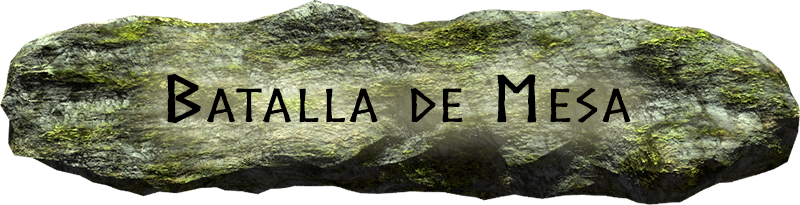
<style>
.page{position:relative;width:800px;height:205px}
.page>*{position:absolute;margin:0}
.t1{font:61.2px "Norse";color:#000000;font-variant:small-caps;font-weight:bold;scale:1.76 1}
</style>
<div class="page">
<p class="t1" style="left:167px;top:74px;width:464px;height:50px">Batalla de Mesa</p>
</div>
